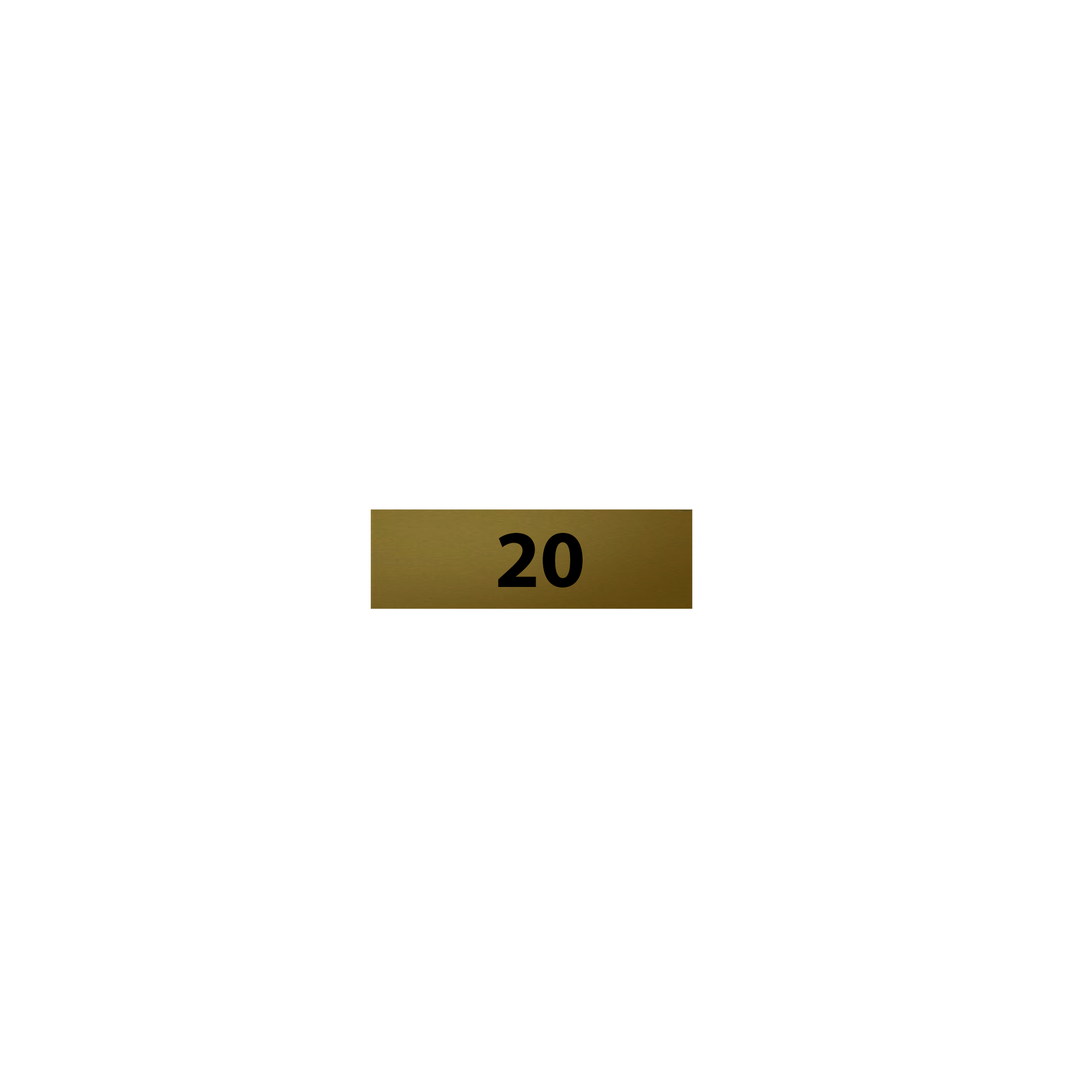
<style>
.page{position:relative;width:1092px;height:1092px;background:#ffffff}
.page>*{position:absolute;margin:0}
.t1{font:81.9px "MyriadPro-Bold";color:#000000}
</style>
<div class="page">
<p class="t1" style="left:498px;top:533px;width:85px;height:54px">20</p>
</div>
